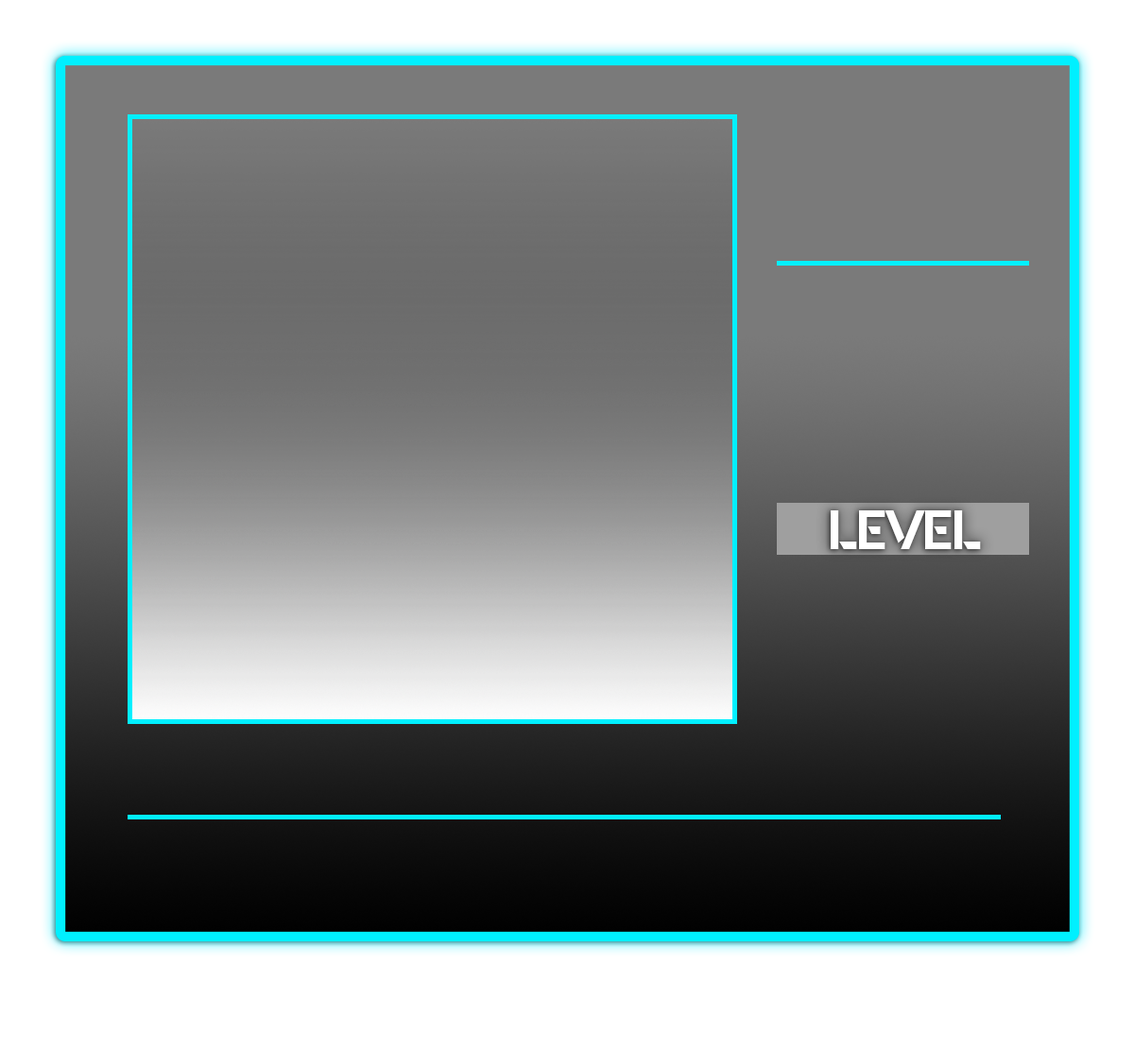
<style>
.page{position:relative;width:1134px;height:1051px}
.page>*{position:absolute;margin:0}
.t1{font:54.5px "Quantify";color:#ffffff}
</style>
<div class="page">
<p class="t1" style="left:831px;top:510px;width:150px;height:39px">LEVEL</p>
</div>
